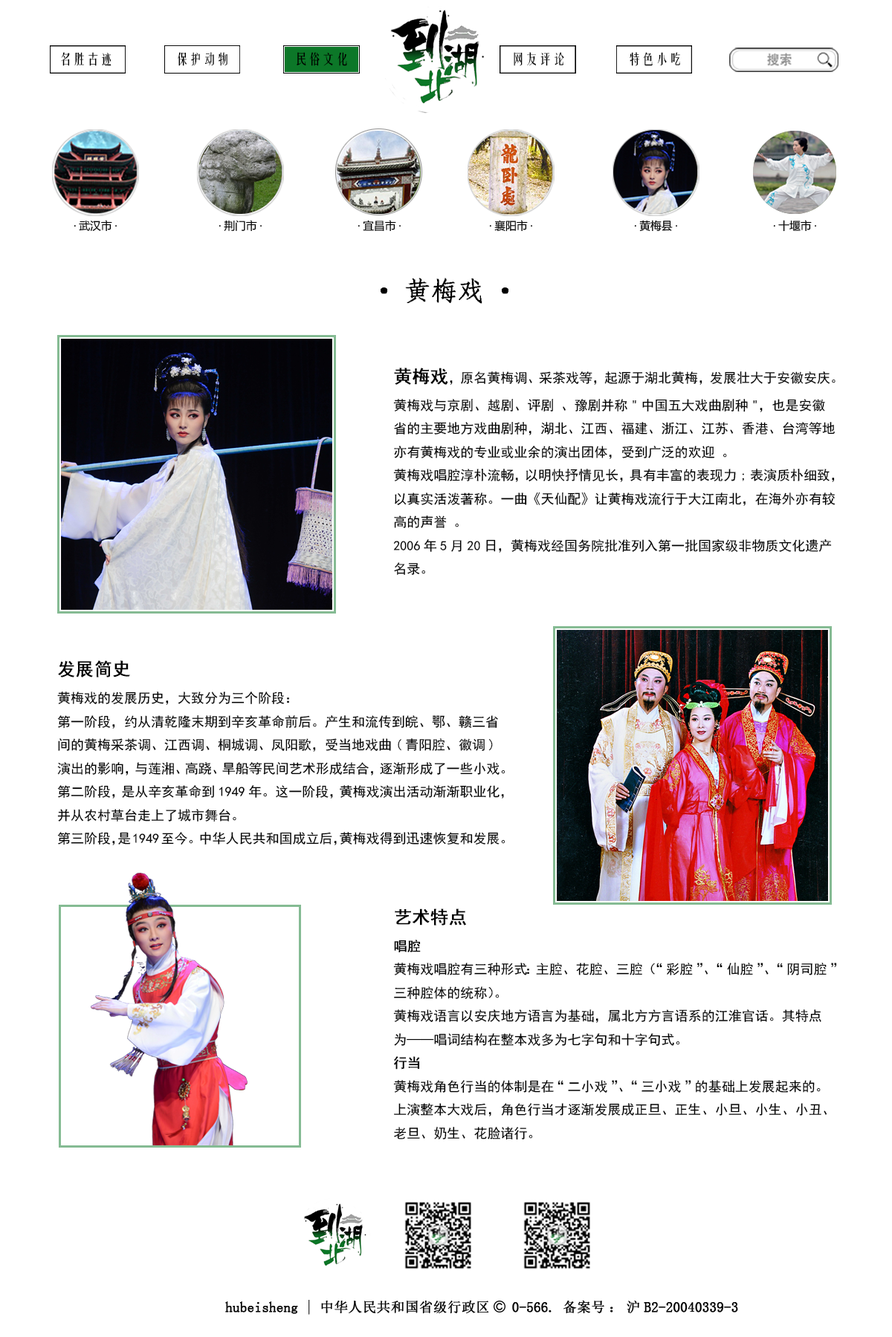
<style>
.page{position:relative;width:892px;height:1337px;background:#ffffff}
.page>*{position:absolute;margin:0}
.t1{font:13.6px "FZYTK--GBK1-0";color:#000000}
.t2{font:26.7px "·ÂËÎ";color:#000000;font-weight:bold}
.t3{font:13.4px "SimHei";color:#000000}
.t4{font:17.8px "SimHei";color:#000000;font-weight:bold}
.t5{font:13.4px "SimHei";color:#000000;font-weight:bold}
</style>
<div class="page">
<p class="t1" style="left:61px;top:52px;width:50px;height:14px">名胜古迹</p>
<p class="t1" style="left:178px;top:52px;width:49px;height:14px">保护动物</p>
<p class="t1" style="left:296px;top:52px;width:51px;height:14px">民俗文化</p>
<p class="t1" style="left:513px;top:52px;width:51px;height:14px">网友评论</p>
<p class="t1" style="left:629px;top:52px;width:51px;height:14px">特色小吃</p>
<p class="t2" style="left:380px;top:278px;width:128px;height:26px">·黄梅戏·</p>
<p class="t3" style="left:393px;top:368px;width:442px;height:207px"><span class="t4">黄梅戏</span>，原名黄梅调、采茶戏等，起源于湖北黄梅，发展壮大于安徽安庆。<br>黄梅戏与京剧、越剧、评剧 、豫剧并称"中国五大戏曲剧种"，也是安徽省的主要地方戏曲剧种，湖北、江西、福建、浙江、江苏、香港、台湾等地亦有黄梅戏的专业或业余的演出团体，受到广泛的欢迎 。<br>黄梅戏唱腔淳朴流畅，以明快抒情见长，具有丰富的表现力;表演质朴细致，以真实活泼著称。一曲《天仙配》让黄梅戏流行于大江南北，在海外亦有较高的声誉 。<br>2006年5月20日，黄梅戏经国务院批准列入第一批国家级非物质文化遗产名录。</p>
<p class="t3" style="left:57px;top:661px;width:448px;height:185px"><span class="t4">发展简史<br></span>黄梅戏的发展历史，大致分为三个阶段：<br>第一阶段，约从清乾隆末期到辛亥革命前后。产生和流传到皖、鄂、赣三省间的黄梅采茶调、江西调、桐城调、凤阳歌，受当地戏曲(青阳腔、徽调)演出的影响，与莲湘、高跷、旱船等民间艺术形成结合，逐渐形成了一些小戏。<br>第二阶段，是从辛亥革命到1949年。这一阶段，黄梅戏演出活动渐渐职业化，并从农村草台走上了城市舞台。<br>第三阶段，是1949至今。中华人民共和国成立后，黄梅戏得到迅速恢复和发展。</p>
<p class="t3" style="left:393px;top:909px;width:444px;height:232px"><span class="t4">艺术特点<br></span><span class="t5">唱腔<br></span>黄梅戏唱腔有三种形式：主腔、花腔、三腔（“彩腔”、“仙腔”、“阴司腔”三种腔体的统称）。<br>黄梅戏语言以安庆地方语言为基础，属北方方言语系的江淮官话。其特点为——唱词结构在整本戏多为七字句和十字句式。<br><span class="t5">行当<br></span>黄梅戏角色行当的体制是在“二小戏”、“三小戏”的基础上发展起来的。上演整本大戏后，角色行当才逐渐发展成正旦、正生、小旦、小生、小丑、老旦、奶生、花脸诸行。</p>
</div>
